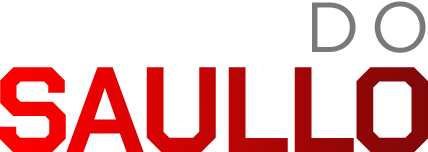
<style>
.page{position:relative;width:428px;height:152px;background:#ffffff}
.page>*{position:absolute;margin:0}
.t1{font:120.8px "ChakraPetch-Bold";letter-spacing:-0.02em}
</style>
<div class="page">
<p class="t1" style="left:0px;top:67px;width:428px;height:85px">SAULLO</p>
</div>
